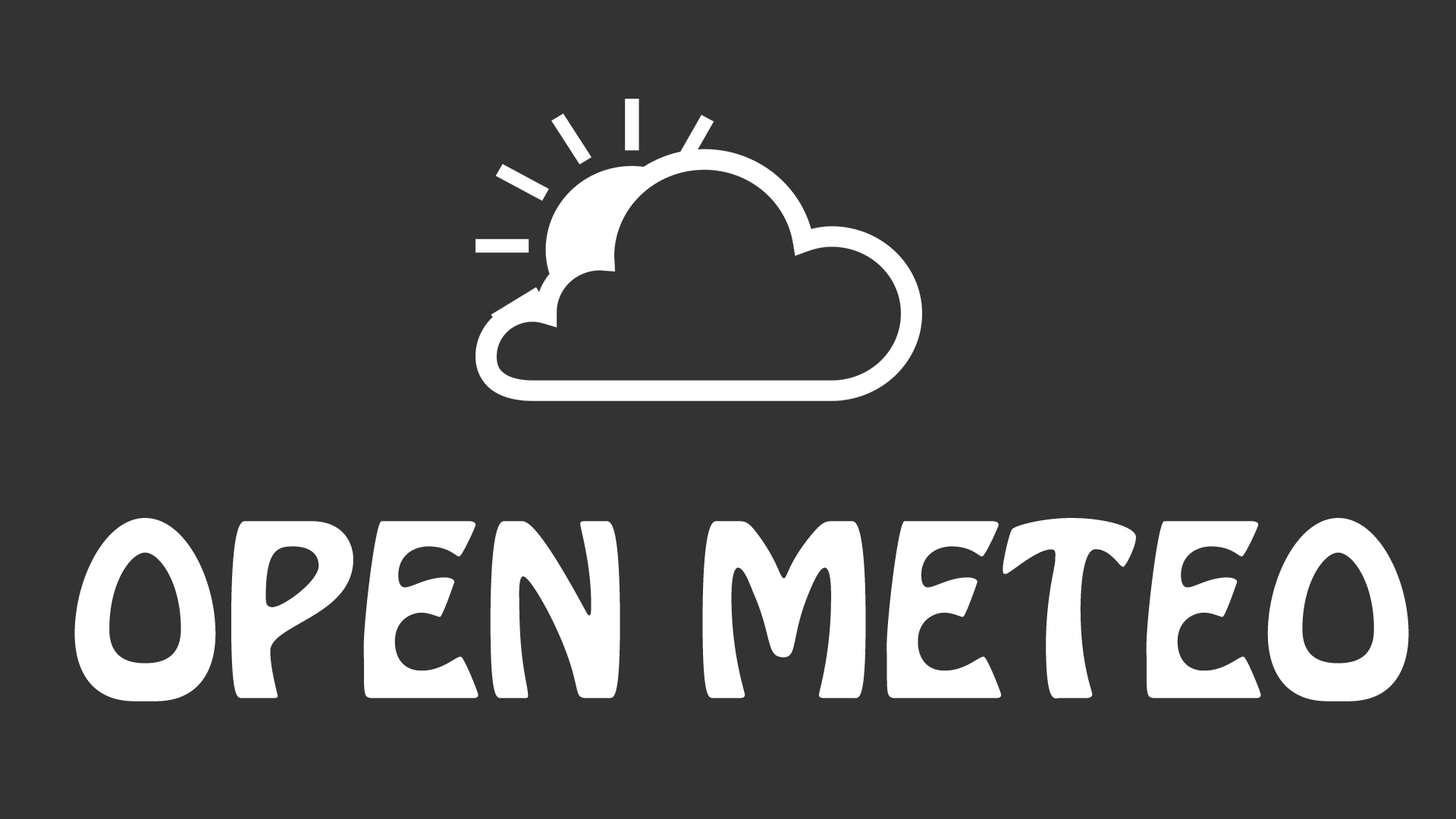
<style>
.page{position:relative;width:1456px;height:819px;background:#333333}
.page>*{position:absolute;margin:0}
.t1{font:212.3px "HoboStd";color:#ffffff}
</style>
<div class="page">
<p class="t1" style="left:74px;top:518px;width:1335px;height:183px">OPEN METEO</p>
</div>
